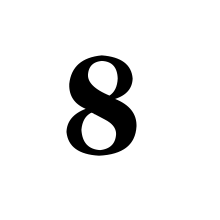
<style>
.page{position:relative;width:220px;height:220px;background:#ffffff}
.page>*{position:absolute;margin:0}
.t1{font:141.1px "FZCHSJW--GB1-0";color:#000000}
</style>
<div class="page">
<p class="t1" style="left:66px;top:55px;width:71px;height:101px">8</p>
</div>
